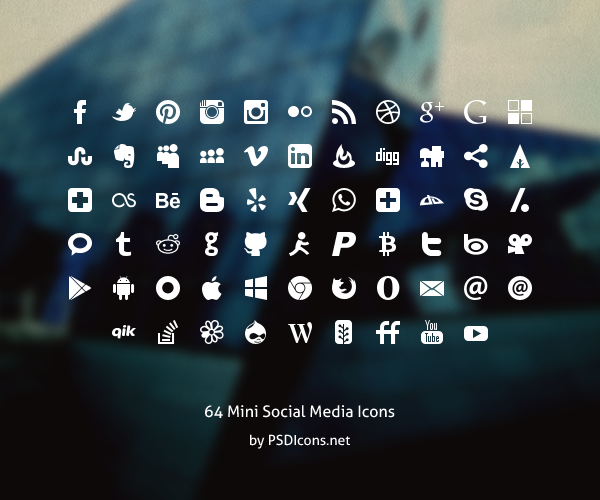
<style>
.page{position:relative;width:600px;height:500px}
.page>*{position:absolute;margin:0}
.t1{font:16px "Aller";color:#ffffff}
.t2{font:14px "Aller";color:#ffffff}
</style>
<div class="page">
<p class="t1" style="left:205px;top:405px;width:190px;height:13px">64 Mini Social Media Icons</p>
<p class="t2" style="left:250px;top:434px;width:100px;height:15px">by PSDIcons.net</p>
</div>
